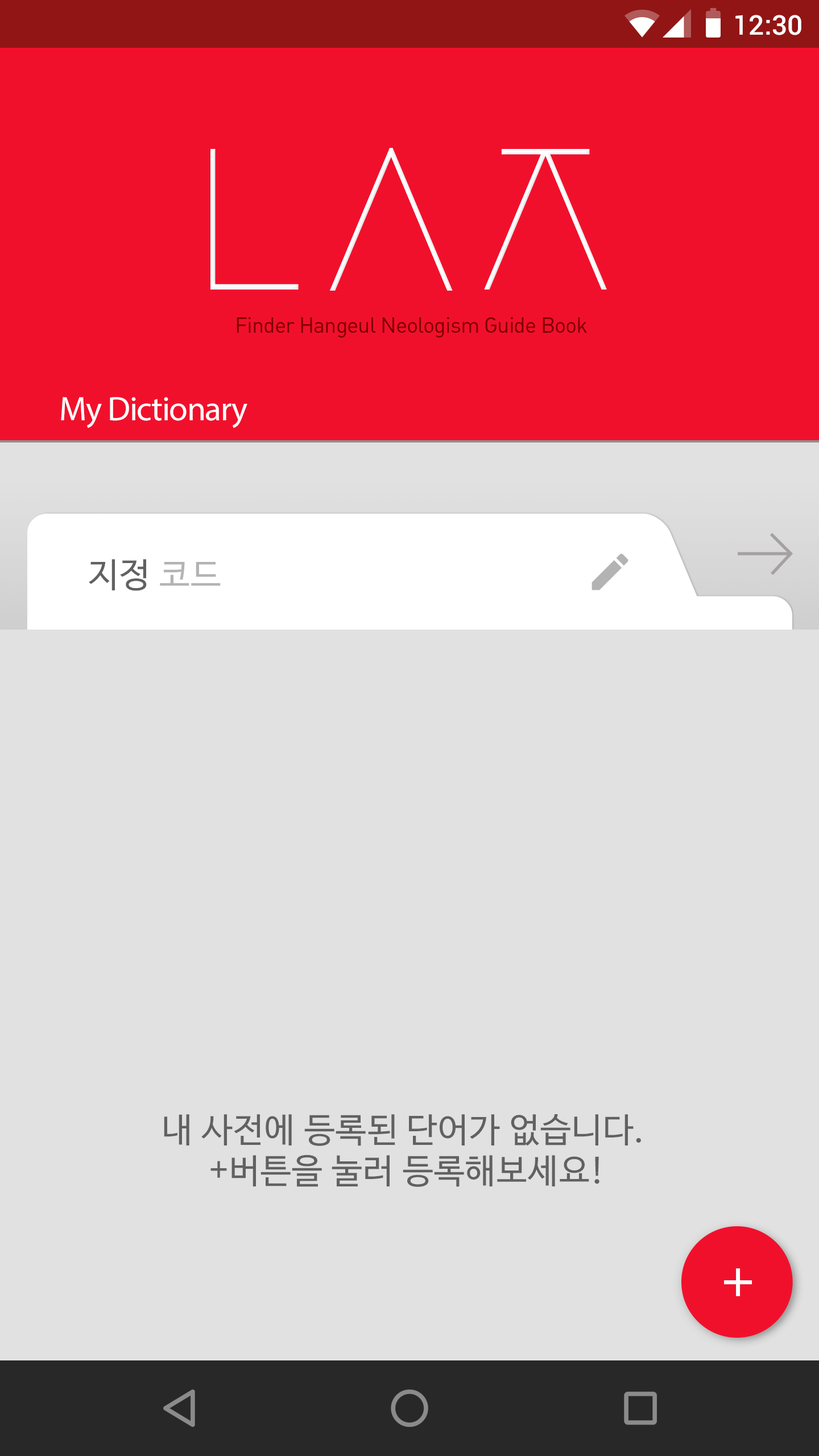
<style>
.page{position:relative;width:819px;height:1456px;background:#e1e1e1}
.page>*{position:absolute;margin:0}
.t1{font:27.3px "Roboto-Medium";color:#ffffff}
.t2{font:21.6px "DINAlternate-Regular";letter-spacing:-0.025em;color:#790101}
.t3{font:34.1px "MyriadPro-Regular";letter-spacing:-0.025em;color:#ffffff}
.t4{font:34.1px "NanumBarunGothic";letter-spacing:0.025em;color:#616161}
.t5{font:34.1px "NanumBarunGothic";letter-spacing:0.025em;color:#b3b3b3}
</style>
<div class="page">
<p class="t1" style="left:735px;top:15px;width:66px;height:20px">12:30</p>
<p class="t2" style="left:237px;top:317px;width:350px;height:21px">Finder Hangeul Neologism Guide Book</p>
<p class="t3" style="left:61px;top:397px;width:186px;height:31px">My Dictionary</p>
<p class="t4" style="left:89px;top:559px;width:132px;height:32px">지정 <span class="t5">코드</span></p>
<p class="t4" style="left:164px;top:1114px;width:477px;height:73px;text-align:center">내 사전에 등록된 단어가 없습니다. <br>+버튼을 눌러 등록해보세요!</p>
</div>
